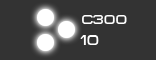
<style>
.page{position:relative;width:156px;height:60px;background:#333333}
.page>*{position:absolute;margin:0}
.t1{font:13px "MetroDF";color:#ffffff}
.t2{font:13.7px "MetroDF";color:#ffffff}
</style>
<div class="page">
<p class="t1" style="left:82px;top:15px;width:45px;height:9px">c300</p>
<p class="t2" style="left:80px;top:35px;width:19px;height:10px">10</p>
</div>
